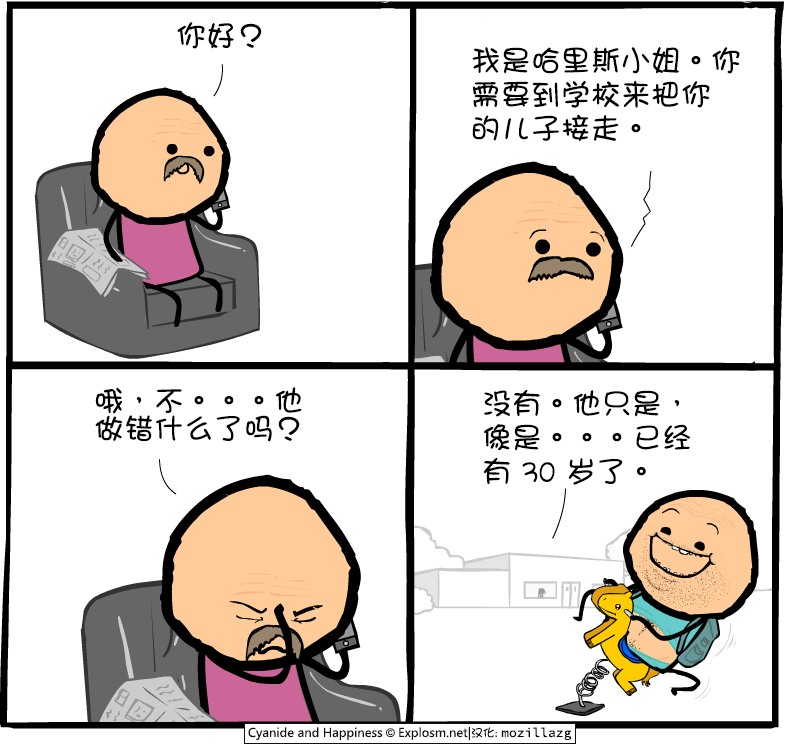
<style>
.page{position:relative;width:786px;height:745px;background:#ffffff}
.page>*{position:absolute;margin:0}
.t1{font:30px "DFGirl";color:#000000}
.t2{font:30px/34px "DFGirl";color:#000000}
.t3{font:30px/28px "DFGirl";color:#000000}
</style>
<div class="page">
<p class="t1" style="left:177px;top:22px;width:85px;height:27px">你好？</p>
<p class="t2" style="left:472px;top:47px;width:268px;height:94px">我是哈里斯小姐。你<br>需要到学校来把你<br>的儿子接走。</p>
<p class="t3" style="left:95px;top:387px;width:207px;height:55px">哦，不。。。他<br>做错什么了吗？</p>
<p class="t2" style="left:483px;top:389px;width:208px;height:96px">没有。他只是，<br>像是。。。已经<br>有 30 岁了。</p>
</div>
